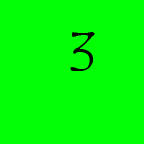
<style>
.page{position:relative;width:144px;height:144px;background:#03ff03}
.page>*{position:absolute;margin:0}
.t1{font:56px "TempusSansITC";color:#000500}
</style>
<div class="page">
<p class="t1" style="left:70px;top:32px;width:25px;height:39px">3</p>
</div>
